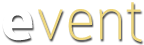
<style>
.page{position:relative;width:144px;height:45px;background:#ffffff}
.page>*{position:absolute;margin:0}
.t1{font:65px "Colaborate-Thin";color:#eed77d}
.t2{font:65px "Colaborate-Bold";color:#ffffff}
</style>
<div class="page">
<p class="t1" style="left:2px;top:2px;width:140px;height:40px"><span class="t2">e</span>vent</p>
</div>
